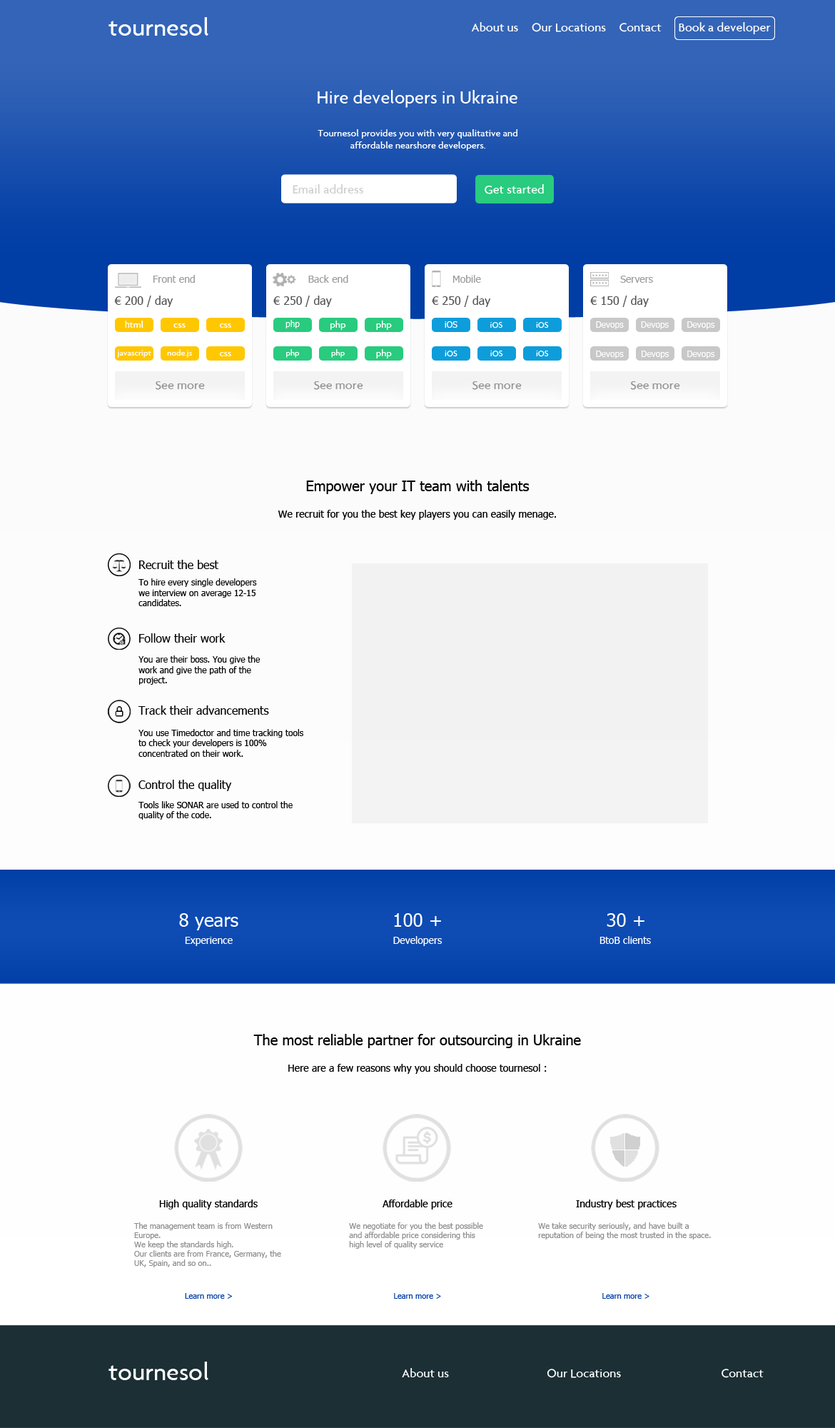
<style>
.page{position:relative;width:835px;height:1428px}
.page>*{position:absolute;margin:0}
.t1{font:25.7px "Agenda-Medium";color:#ffffff}
.t2{font:12.8px "Agenda-Medium";color:#ffffff}
.t3{font:18.6px "Agenda-Medium";color:#ffffff}
.t4{font:10px "Agenda-Medium";color:#ffffff}
.t5{font:12.8px "Agenda-Medium";color:#cecece}
.t6{font:10px "Tahoma";color:#9f9f9f}
.t7{font:11.4px "Tahoma";color:#515151}
.t8{font:8.6px "Tahoma";color:#ffffff}
.t9{font:8.6px "Agenda-Medium";color:#ffffff}
.t10{font:12.8px "Agenda-Medium";color:#959595}
.t11{font:14.3px "Tahoma";color:#000000}
.t12{font:10px "Tahoma";color:#000000}
.t13{font:11.4px "Tahoma";color:#000000}
.t14{font:8.6px "Tahoma";color:#000000}
.t15{font:18.6px "Tahoma";color:#ffffff}
.t16{font:10px "Tahoma";color:#ffffff}
.t17{font:7.9px "Tahoma";color:#8e8e8e}
.t18{font:7.9px "Tahoma";color:#003da5}
</style>
<div class="page">
<p class="t1" style="left:109px;top:17px;width:100px;height:19px">tournesol</p>
<p class="t2" style="left:471px;top:22px;width:47px;height:9px">About us</p>
<p class="t2" style="left:532px;top:23px;width:74px;height:9px">Our Locations</p>
<p class="t2" style="left:620px;top:23px;width:42px;height:9px">Contact</p>
<p class="t2" style="left:679px;top:22px;width:92px;height:12px">Book a developer</p>
<p class="t3" style="left:318px;top:90px;width:200px;height:18px">Hire developers in Ukraine</p>
<p class="t4" style="left:318px;top:129px;width:200px;height:22px;text-align:center">Tournesol provides you with very qualitative and affordable nearshore developers.</p>
<p class="t5" style="left:293px;top:184px;width:70px;height:10px">Email address</p>
<p class="t2" style="left:485px;top:184px;width:59px;height:10px">Get started</p>
<p class="t6" style="left:153px;top:275px;width:42px;height:8px">Front end</p>
<p class="t6" style="left:308px;top:275px;width:40px;height:8px">Back end</p>
<p class="t6" style="left:453px;top:275px;width:28px;height:8px">Mobile</p>
<p class="t6" style="left:620px;top:276px;width:33px;height:7px">Servers</p>
<p class="t7" style="left:114px;top:296px;width:59px;height:11px">€ 200 / day</p>
<p class="t7" style="left:273px;top:296px;width:59px;height:11px">€ 250 / day</p>
<p class="t7" style="left:432px;top:296px;width:59px;height:11px">€ 250 / day</p>
<p class="t7" style="left:590px;top:296px;width:59px;height:11px">€ 150 / day</p>
<p class="t4" style="left:125px;top:321px;width:18px;height:7px"><span class="t8">h</span>tml</p>
<p class="t4" style="left:173px;top:323px;width:13px;height:5px">css</p>
<p class="t4" style="left:219px;top:323px;width:12px;height:5px">css</p>
<p class="t8" style="left:286px;top:320px;width:14px;height:8px">php</p>
<p class="t4" style="left:331px;top:321px;width:15px;height:9px">php</p>
<p class="t4" style="left:376px;top:321px;width:16px;height:9px">php</p>
<p class="t8" style="left:445px;top:321px;width:13px;height:7px">iOS</p>
<p class="t9" style="left:490px;top:322px;width:13px;height:6px">iOS</p>
<p class="t9" style="left:536px;top:322px;width:13px;height:6px">iOS</p>
<p class="t8" style="left:596px;top:321px;width:28px;height:8px">Devops</p>
<p class="t8" style="left:641px;top:321px;width:28px;height:8px">Devops</p>
<p class="t8" style="left:687px;top:321px;width:28px;height:8px">Devops</p>
<p class="t9" style="left:117px;top:350px;width:34px;height:8px">javascript</p>
<p class="t9" style="left:167px;top:349px;width:25px;height:9px">node.js</p>
<p class="t4" style="left:219px;top:352px;width:12px;height:4px">css</p>
<p class="t9" style="left:286px;top:349px;width:14px;height:9px">php</p>
<p class="t9" style="left:331px;top:349px;width:14px;height:9px">php</p>
<p class="t4" style="left:376px;top:349px;width:16px;height:9px">php</p>
<p class="t9" style="left:445px;top:351px;width:13px;height:6px">iOS</p>
<p class="t9" style="left:490px;top:351px;width:13px;height:6px">iOS</p>
<p class="t9" style="left:536px;top:351px;width:13px;height:6px">iOS</p>
<p class="t8" style="left:596px;top:351px;width:28px;height:7px">Devops</p>
<p class="t8" style="left:642px;top:351px;width:27px;height:7px">Devops</p>
<p class="t8" style="left:687px;top:351px;width:28px;height:7px">Devops</p>
<p class="t10" style="left:156px;top:381px;width:49px;height:9px">See more</p>
<p class="t10" style="left:314px;top:381px;width:49px;height:9px">See more</p>
<p class="t10" style="left:473px;top:381px;width:49px;height:9px">See more</p>
<p class="t10" style="left:630px;top:381px;width:50px;height:9px">See more</p>
<p class="t11" style="left:306px;top:480px;width:224px;height:14px">Empower your IT team with talents</p>
<p class="t12" style="left:278px;top:510px;width:278px;height:10px">We recruit for you the best key players you can easily menage.</p>
<p class="t13" style="left:139px;top:560px;width:79px;height:9px">Recruit the best</p>
<p class="t14" style="left:138px;top:578px;width:119px;height:28px">To hire every single developers we interview on average 12-15 candidates.</p>
<p class="t13" style="left:139px;top:633px;width:87px;height:9px">Follow their work</p>
<p class="t14" style="left:138px;top:655px;width:123px;height:30px">You are their boss. You give the work and give the path of the project.</p>
<p class="t13" style="left:138px;top:705px;width:131px;height:10px">Track their advancements</p>
<p class="t14" style="left:138px;top:729px;width:165px;height:28px">You use Timedoctor and time tracking tools to check your developers is 100% concentrated on their work.</p>
<p class="t13" style="left:138px;top:780px;width:94px;height:11px">Control the quality</p>
<p class="t14" style="left:138px;top:801px;width:155px;height:19px">Tools like SONAR are used to control the quality of the code.</p>
<p class="t15" style="left:179px;top:913px;width:59px;height:17px">8 years</p>
<p class="t15" style="left:394px;top:913px;width:47px;height:14px">100 +</p>
<p class="t15" style="left:607px;top:913px;width:38px;height:14px">30 +</p>
<p class="t16" style="left:185px;top:937px;width:48px;height:9px">Experience</p>
<p class="t16" style="left:393px;top:936px;width:50px;height:10px">Developers</p>
<p class="t16" style="left:600px;top:936px;width:51px;height:8px">BtoB clients</p>
<p class="t11" style="left:253px;top:1034px;width:328px;height:14px">The most reliable partner for outsourcing in Ukraine</p>
<p class="t12" style="left:288px;top:1064px;width:259px;height:10px">Here are a few reasons why you should choose tournesol :</p>
<p class="t12" style="left:159px;top:1199px;width:99px;height:10px">High quality standards</p>
<p class="t12" style="left:383px;top:1199px;width:70px;height:10px">Affordable price</p>
<p class="t12" style="left:576px;top:1199px;width:101px;height:10px">Industry best practices</p>
<p class="t17" style="left:133px;top:1222px;width:148px;height:45px">The management team is from Western Europe.<br>We keep the standards high.<br>Our clients are from France, Germany, the UK, Spain, and so on..</p>
<p class="t17" style="left:349px;top:1222px;width:134px;height:27px">We negotiate for you the best possible and affordable price considering this high level of quality service</p>
<p class="t17" style="left:538px;top:1222px;width:173px;height:17px">We take security seriously, and have built a reputation of being the most trusted in the space.</p>
<p class="t18" style="left:185px;top:1293px;width:47px;height:5px">Learn more &gt;</p>
<p class="t18" style="left:394px;top:1293px;width:47px;height:5px">Learn more &gt;</p>
<p class="t18" style="left:602px;top:1293px;width:48px;height:5px">Learn more &gt;</p>
<p class="t1" style="left:109px;top:1361px;width:100px;height:19px">tournesol</p>
<p class="t2" style="left:402px;top:1368px;width:47px;height:9px">About us</p>
<p class="t2" style="left:547px;top:1368px;width:74px;height:10px">Our Locations</p>
<p class="t2" style="left:722px;top:1368px;width:42px;height:10px">Contact</p>
</div>
